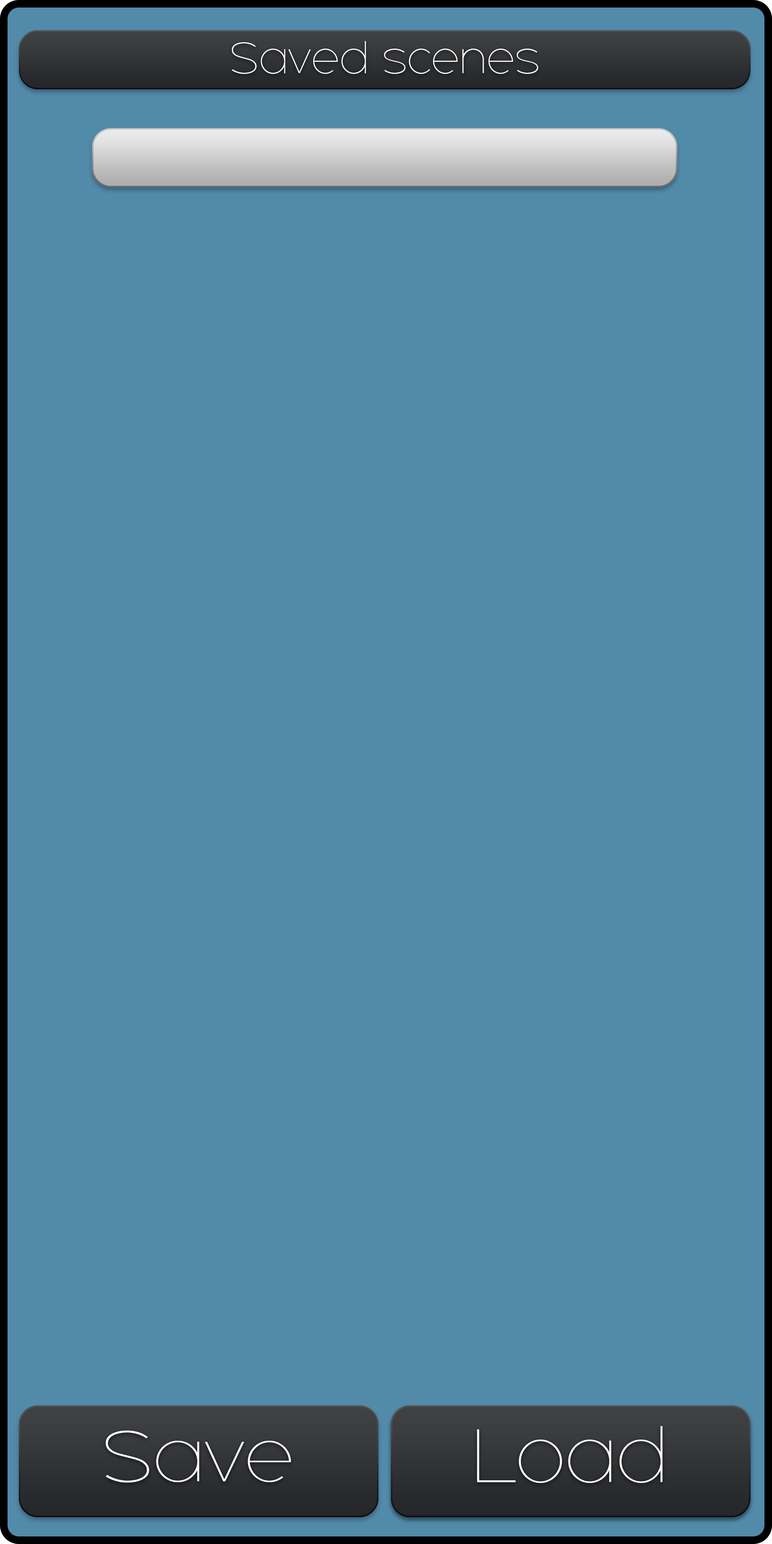
<style>
.page{position:relative;width:772px;height:1544px;background:#528aaa}
.page>*{position:absolute;margin:0}
.t1{font:37.7px "Adequate-ExtraLight";color:#ffffff}
.t2{font:62.7px "Adequate-ExtraLight";color:#ffffff;scale:1.04 1}
.t3{font:66px "Adequate-ExtraLight";color:#ffffff}
</style>
<div class="page">
<p class="t1" style="left:231px;top:41px;width:307px;height:33px">Saved scenes</p>
<p class="t2" style="left:106px;top:1431px;width:185px;height:52px">Save</p>
<p class="t3" style="left:477px;top:1426px;width:186px;height:57px">Load</p>
</div>
